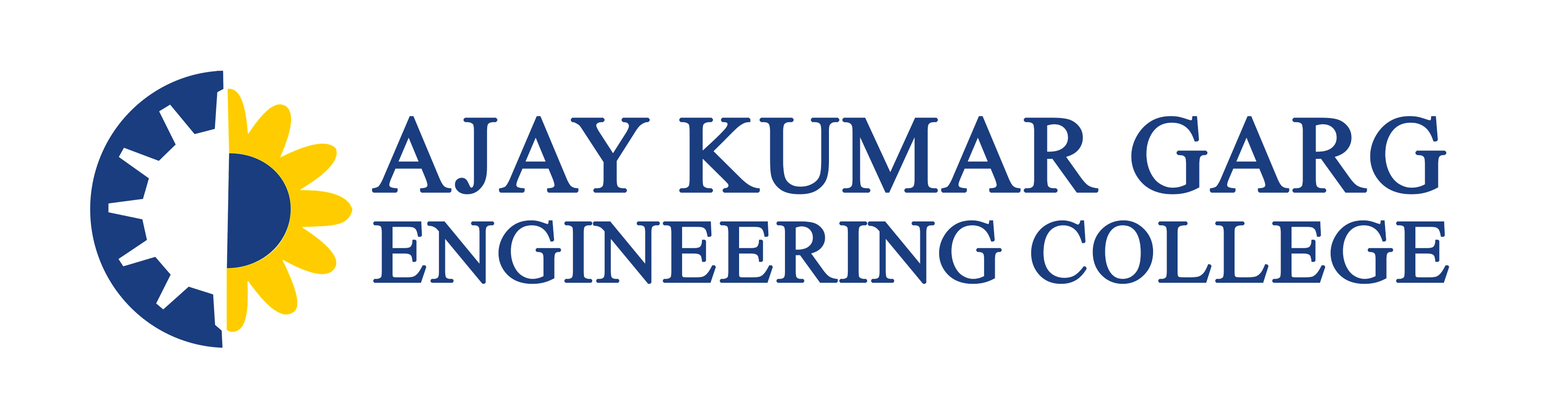
<style>
.page{position:relative;width:1568px;height:418px;background:#ffffff}
.page>*{position:absolute;margin:0}
.t1{font:89.3px/90.7px "TimesNewRomanPSMT";color:#193d7f;text-transform:uppercase;font-weight:bold}
.t2{font:108.9px/90.7px "TimesNewRomanPSMT";color:#193d7f;text-transform:uppercase;font-weight:bold}
</style>
<div class="page">
<p class="t1" style="left:372px;top:116px;width:1077px;height:168px"><span class="t2">Ajay Kumar Garg<br></span>Engineering College</p>
</div>
